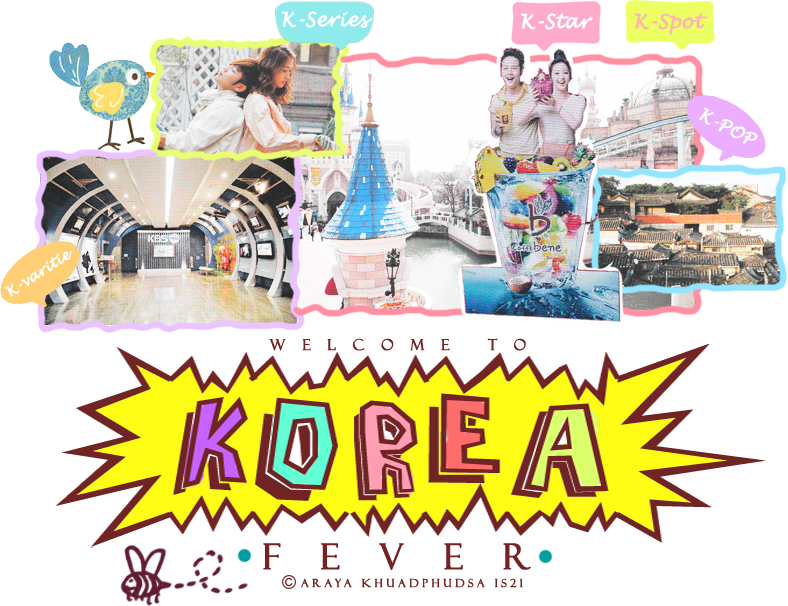
<style>
.page{position:relative;width:788px;height:606px;background:#ffffff}
.page>*{position:absolute;margin:0}
.t1{font:19px "LucidaHandwriting-Italic";color:#ffffff;font-weight:bold}
.t2{font:19px "LucidaHandwriting-Italic";color:#ffb4b4;font-weight:bold}
.t3{font:17px "LucidaHandwriting-Italic";color:#ffffff;font-weight:bold}
.t4{font:14px "LucidaHandwriting-Italic";color:#ffffff;font-weight:bold}
.t5{font:15px "FelixTitlingMT";letter-spacing:1.12em;color:#742222;font-weight:bold}
.t6{font:35px "FelixTitlingMT";letter-spacing:1.12em;color:#742222;font-weight:bold}
.t7{font:11px "FelixTitlingMT";letter-spacing:0.3em;color:#742222;font-weight:bold}
</style>
<div class="page">
<p class="t1" style="left:282px;top:11px;width:91px;height:17px">K-Series</p>
<p class="t1" style="left:521px;top:13px;width:72px;height:17px">K-Star</p>
<p class="t2" style="left:634px;top:13px;width:74px;height:22px">K-Spot</p>
<p class="t3" style="left:699px;top:107px;width:59px;height:37px;rotate:27deg">K-POP</p>
<p class="t4" style="left:4px;top:250px;width:68px;height:47px;rotate:-33deg">K-varitie</p>
<p class="t5" style="left:269px;top:338px;width:257px;height:13px">Welcome to</p>
<p class="t6" style="left:263px;top:543px;width:268px;height:27px">fever</p>
<p class="t7" style="left:300px;top:578px;width:223px;height:10px">araya Khuadphudsa is21</p>
</div>
